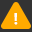
<style>
.page{position:relative;width:32px;height:32px;background:#333333}
.page>*{position:absolute;margin:0}
.t1{font:16px "SegoeUI-Bold";color:#ffffff}
</style>
<div class="page">
<p class="t1" style="left:14px;top:13px;width:4px;height:12px">!</p>
</div>
